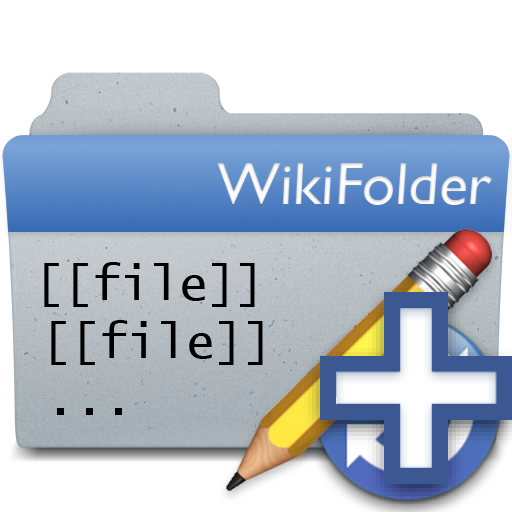
<style>
.page{position:relative;width:512px;height:512px;background:#ffffff}
.page>*{position:absolute;margin:0}
.t1{font:48px "LucidaConsole";color:#000000}
</style>
<div class="page">
<p class="t1" style="left:44px;top:262px;width:219px;height:153px">[[file]]<br> [[file]]<br>  ...</p>
</div>
